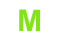
<style>
.page{position:relative;width:60px;height:40px;background:#ffffff}
.page>*{position:absolute;margin:0}
.t1{font:30px "Arial-BoldMT";letter-spacing:-0.025em;color:#81e416}
</style>
<div class="page">
<p class="t1" style="left:19px;top:9px;width:22px;height:23px;rotate:1deg">M</p>
</div>
